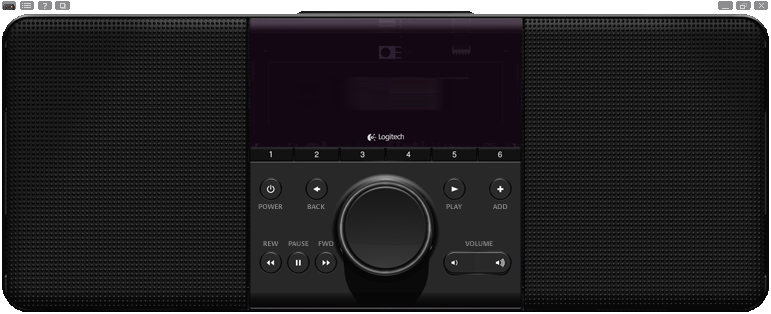
<style>
.page{position:relative;width:771px;height:314px}
.page>*{position:absolute;margin:0}
.t1{font:7px "Praxis-Bold";color:#818181}
</style>
<div class="page">
<p class="t1" style="left:258px;top:204px;width:25px;height:5px">POWER</p>
<p class="t1" style="left:307px;top:204px;width:18px;height:5px">BACK</p>
<p class="t1" style="left:446px;top:204px;width:16px;height:5px">PLAY</p>
<p class="t1" style="left:493px;top:204px;width:15px;height:5px">ADD</p>
<p class="t1" style="left:263px;top:241px;width:16px;height:5px">REW</p>
<p class="t1" style="left:288px;top:241px;width:21px;height:5px">PAUSE</p>
<p class="t1" style="left:318px;top:241px;width:16px;height:5px">FWD</p>
<p class="t1" style="left:465px;top:241px;width:28px;height:5px">VOLUME</p>
</div>
